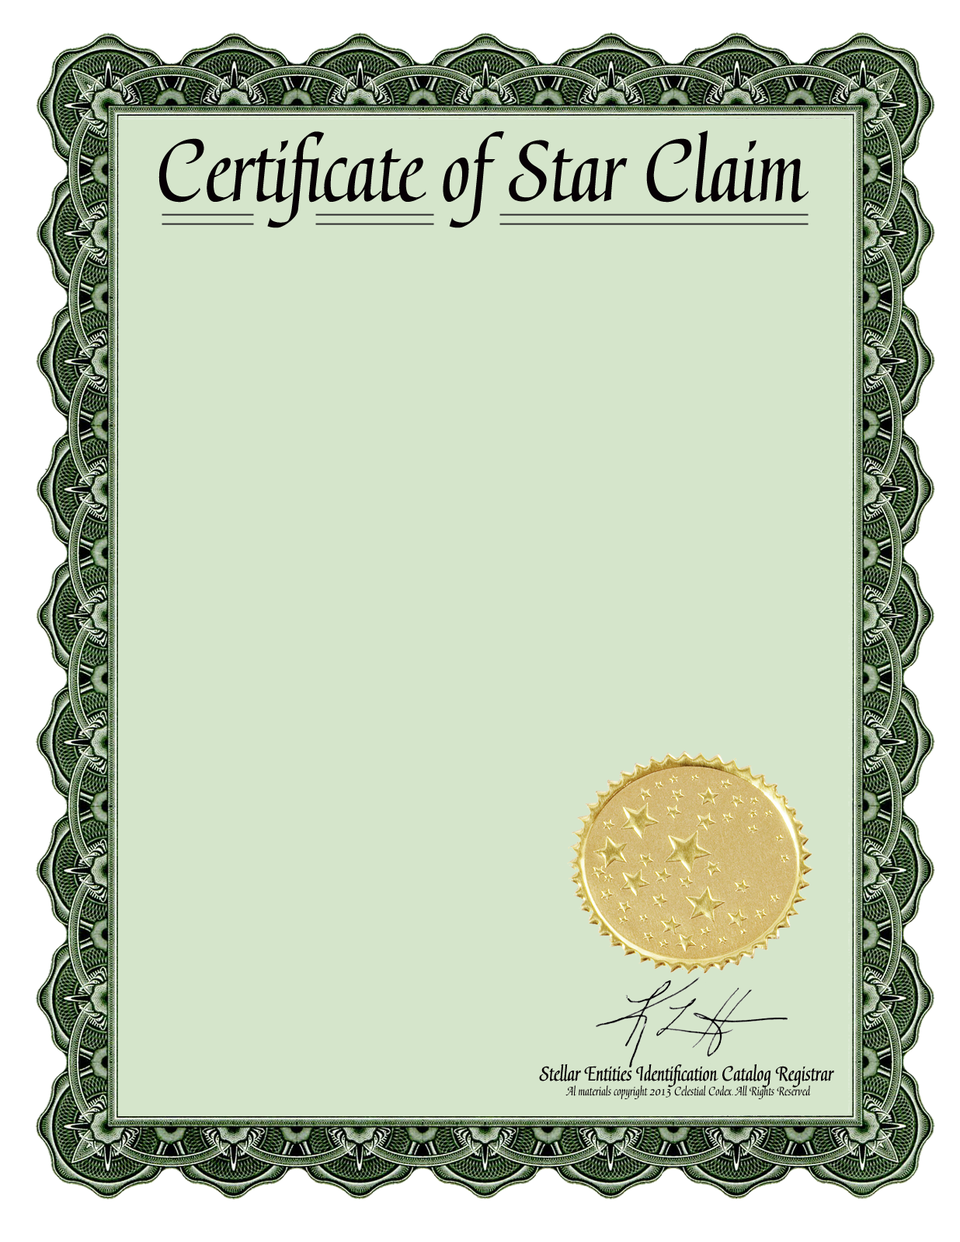
<style>
.page{position:relative;width:960px;height:1242px;background:#d5e5cb}
.page>*{position:absolute;margin:0}
.t1{font:99.4px "Gertrud-Italic";color:#060004}
.t2{font:23.3px "Gertrud-Italic";color:#060004}
.t3{font:14px "Gertrud-Italic";color:#060004}
</style>
<div class="page">
<p class="t1" style="left:158px;top:130px;width:650px;height:98px">Certificate of Star Claim</p>
<p class="t2" style="left:539px;top:1065px;width:295px;height:23px">Stellar Entities Identification Catalog Registrar</p>
<p class="t3" style="left:565px;top:1086px;width:246px;height:14px">Al materials copyright 2013 Celestial Codex. All Rights Reserved</p>
</div>
